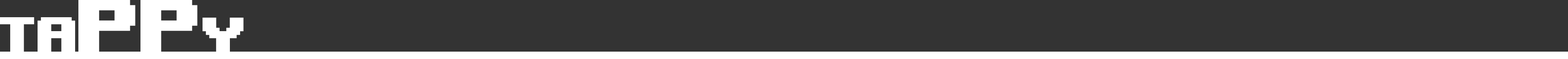
<style>
.page{position:relative;width:1568px;height:59px;background:#333333}
.page>*{position:absolute;margin:0}
.t1{font:68.3px "UpheavalPro-Regular";color:#ffffff}
.t2{font:103.4px "UpheavalPro-Regular";color:#ffffff}
</style>
<div class="page">
<p class="t1" style="left:0px;top:0px;width:244px;height:51px">Ta<span class="t2">pp</span>y</p>
</div>
